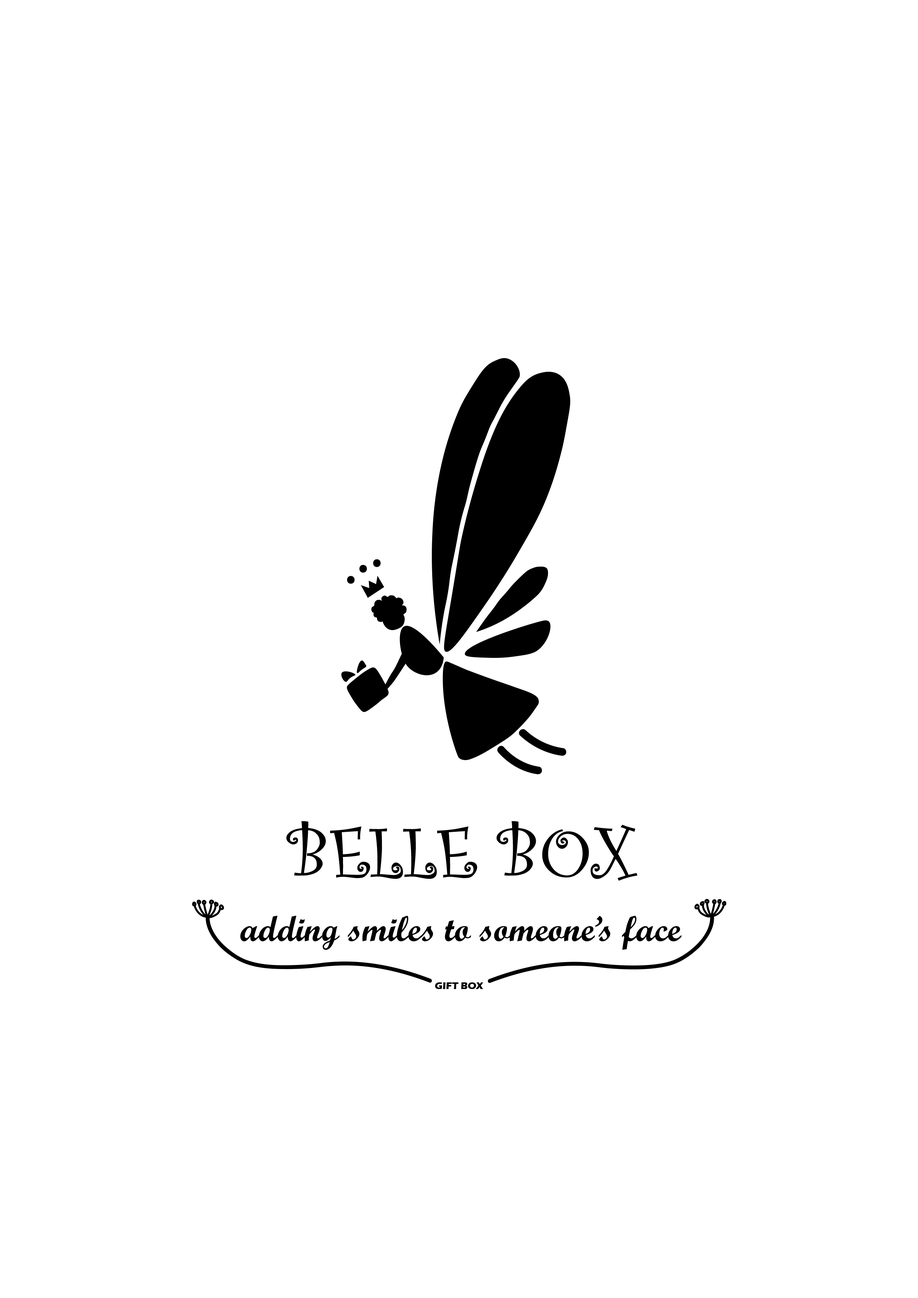
<style>
.page{position:relative;width:918px;height:1298px;background:#ffffff}
.page>*{position:absolute;margin:0}
.t1{font:35.8px "ScriptMTBold";color:#000000}
.t2{font:9.8px "ErasITC-Bold";color:#000000}
</style>
<div class="page">
<p class="t1" style="left:240px;top:916px;width:442px;height:34px">adding smiles to someone’s face</p>
<p class="t2" style="left:435px;top:983px;width:48px;height:6px">GIFT BOX</p>
</div>
